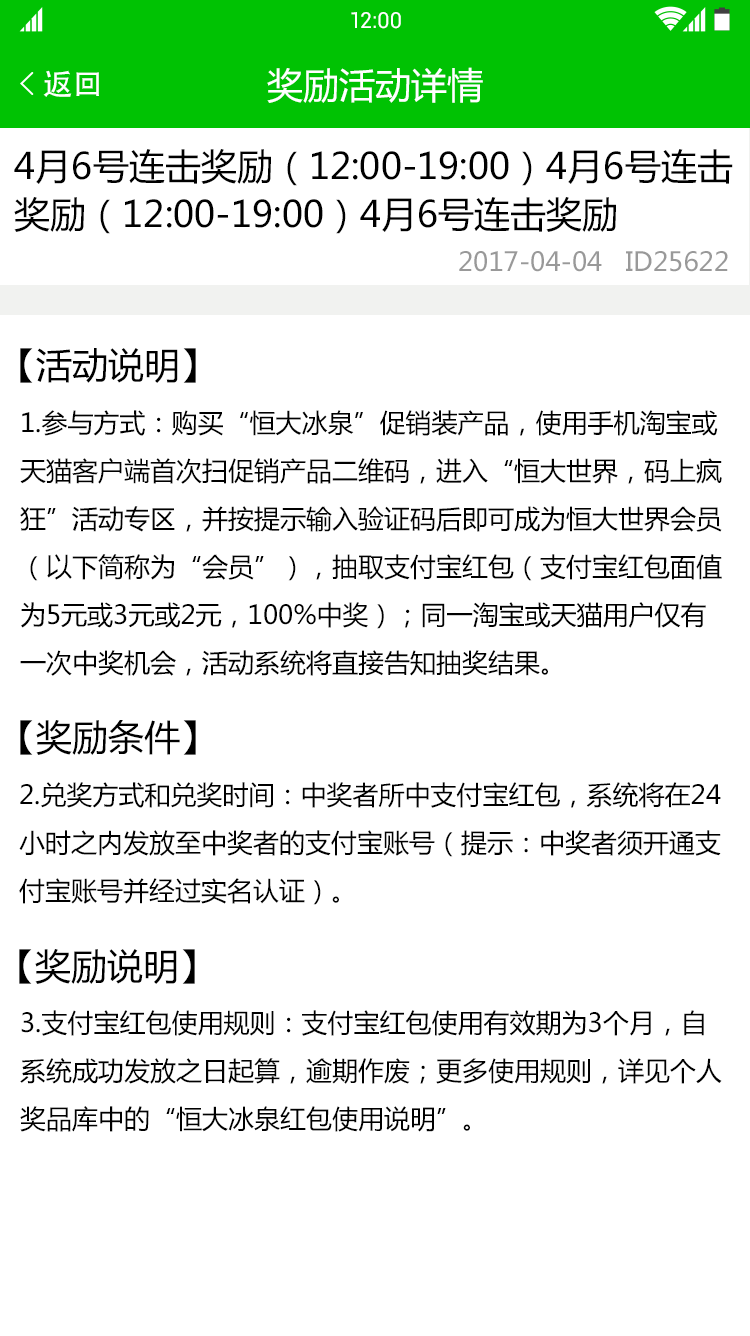
<style>
.page{position:relative;width:750px;height:1336px;background:#ffffff}
.page>*{position:absolute;margin:0}
.t1{font:22px "Roboto-Regular";color:#ffffff}
.t2{font:30px "AdobeHeitiStd-Regular";color:#ffffff}
.t3{font:36px "MicrosoftYaHei";color:#ffffff}
.t4{font:36px/48px "MicrosoftYaHei";color:#000000}
.t5{font:26px "MicrosoftYaHei";color:#999999}
.t6{font:36px "MicrosoftYaHei";color:#000000}
.t7{font:26px/48px "MicrosoftYaHei";color:#000000}
</style>
<div class="page">
<p class="t1" style="left:351px;top:12px;width:50px;height:17px">12:00</p>
<p class="t2" style="left:43px;top:70px;width:56px;height:27px">返回</p>
<p class="t3" style="left:267px;top:67px;width:216px;height:36px">奖励活动详情</p>
<p class="t4" style="left:14px;top:149px;width:719px;height:85px">4月6号连击奖励（12:00-19:00）4月6号连击<br>奖励（12:00-19:00）4月6号连击奖励</p>
<p class="t5" style="left:459px;top:251px;width:269px;height:21px">2017-04-04   ID25622</p>
<p class="t6" style="left:20px;top:348px;width:176px;height:35px">【活动说明】</p>
<p class="t7" style="left:20px;top:410px;width:702px;height:266px">1.参与方式：购买“恒大冰泉”促销装产品，使用手机淘宝或天猫客户端首次扫促销产品二维码，进入“恒大世界，码上疯狂”活动专区，并按提示输入验证码后即可成为恒大世界会员（以下简称为“会员”），抽取支付宝红包（支付宝红包面值为5元或3元或2元，100%中奖）；同一淘宝或天猫用户仅有一次中奖机会，活动系统将直接告知抽奖结果。</p>
<p class="t6" style="left:20px;top:720px;width:176px;height:35px">【奖励条件】</p>
<p class="t7" style="left:19px;top:782px;width:702px;height:123px">2.兑奖方式和兑奖时间：中奖者所中支付宝红包，系统将在24小时之内发放至中奖者的支付宝账号（提示：中奖者须开通支付宝账号并经过实名认证）。</p>
<p class="t6" style="left:19px;top:949px;width:176px;height:35px">【奖励说明】</p>
<p class="t7" style="left:20px;top:1010px;width:702px;height:122px">3.支付宝红包使用规则：支付宝红包使用有效期为3个月，自系统成功发放之日起算，逾期作废；更多使用规则，详见个人奖品库中的“恒大冰泉红包使用说明”。</p>
</div>
